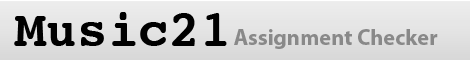
<style>
.page{position:relative;width:470px;height:60px}
.page>*{position:absolute;margin:0}
.t1{font:51.2px "Courier-Bold";color:#000000}
.t2{font:22.5px "MyriadPro-Bold";color:#898989}
</style>
<div class="page">
<p class="t1" style="left:14px;top:12px;width:213px;height:34px">Music21</p>
<p class="t2" style="left:234px;top:29px;width:204px;height:20px">Assignment Checker</p>
</div>
